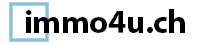
<style>
.page{position:relative;width:220px;height:45px;background:#ffffff}
.page>*{position:absolute;margin:0}
.t1{font:33.1px "MyriadHebrew-Bold";color:#000000}
</style>
<div class="page">
<p class="t1" style="left:26px;top:9px;width:159px;height:24px">immo4u.ch</p>
</div>
